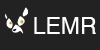
<style>
.page{position:relative;width:100px;height:50px;background:#222222}
.page>*{position:absolute;margin:0}
.t1{font:22.9px "Helvetica";color:#ffffff}
</style>
<div class="page">
<p class="t1" style="left:34px;top:17px;width:62px;height:17px">LEMR</p>
</div>
